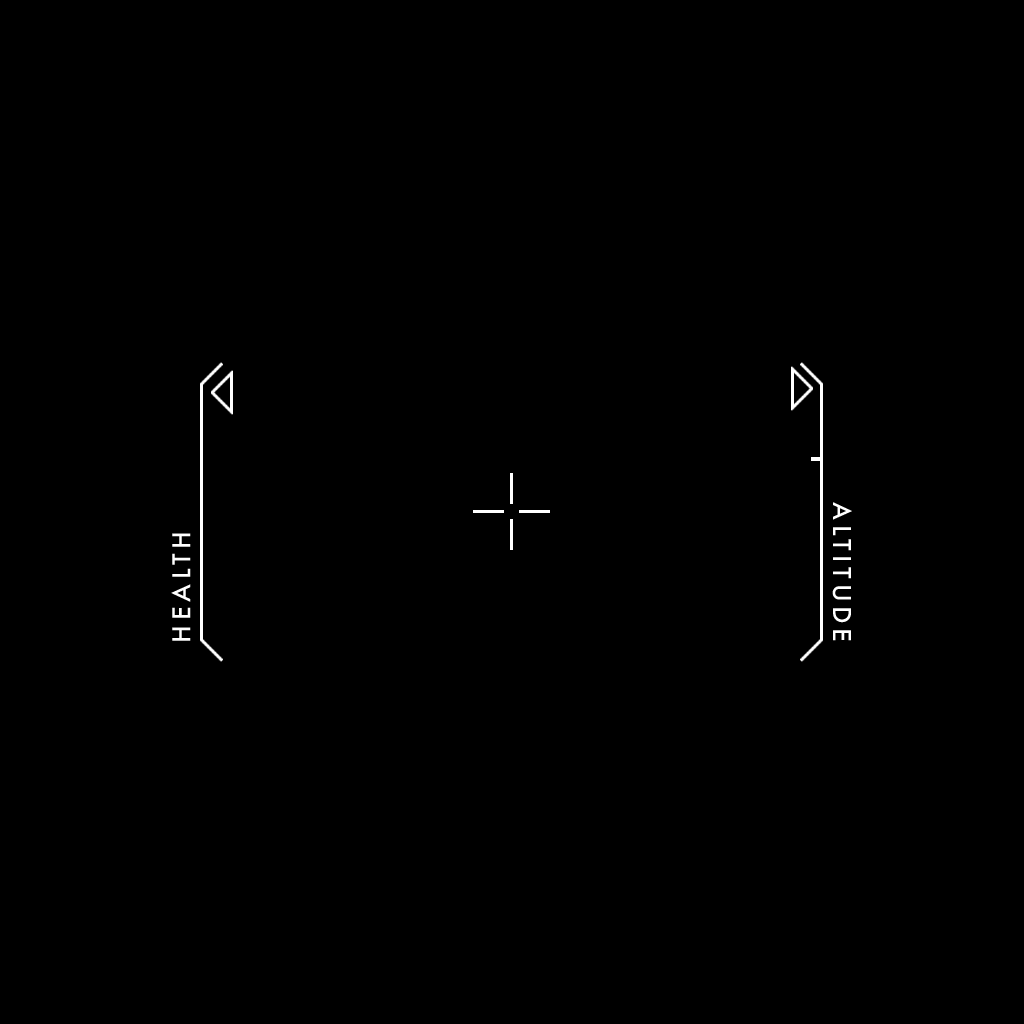
<style>
.page{position:relative;width:1024px;height:1024px;background:#000000}
.page>*{position:absolute;margin:0}
.t1{font:24px "Futura-Medium";letter-spacing:0.2em;color:#ffffff}
</style>
<div class="page">
<p class="t1" style="left:832px;top:502px;width:20px;height:139px;rotate:90deg">ALTITUDE</p>
<p class="t1" style="left:171px;top:533px;width:20px;height:108px;rotate:-90deg">HEALTH</p>
</div>
